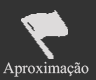
<style>
.page{position:relative;width:96px;height:80px;background:#333333}
.page>*{position:absolute;margin:0}
.t1{font:24.1px "AngsanaUPC";color:#dddada}
</style>
<div class="page">
<p class="t1" style="left:3px;top:61px;width:86px;height:16px">Aproximação</p>
</div>
